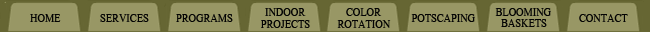
<style>
.page{position:relative;width:650px;height:32px;background:#989765}
.page>*{position:absolute;margin:0}
.t1{font:16px "Aparajita";color:#030303;scale:0.8 1}
</style>
<div class="page">
<p class="t1" style="left:30px;top:14px;width:31px;height:8px">HOME</p>
<p class="t1" style="left:100px;top:14px;width:49px;height:8px">SERVICES</p>
<p class="t1" style="left:176px;top:14px;width:57px;height:8px">PROGRAMS</p>
<p class="t1" style="left:265px;top:8px;width:41px;height:8px">INDOOR</p>
<p class="t1" style="left:346px;top:8px;width:36px;height:8px">COLOR</p>
<p class="t1" style="left:411px;top:14px;width:64px;height:8px">POTSCAPING</p>
<p class="t1" style="left:495px;top:8px;width:56px;height:8px">BLOOMING</p>
<p class="t1" style="left:579px;top:14px;width:49px;height:8px">CONTACT</p>
<p class="t1" style="left:261px;top:20px;width:49px;height:8px">PROJECTS</p>
<p class="t1" style="left:337px;top:20px;width:54px;height:8px">ROTATION</p>
<p class="t1" style="left:501px;top:19px;width:46px;height:8px">BASKETS</p>
</div>
